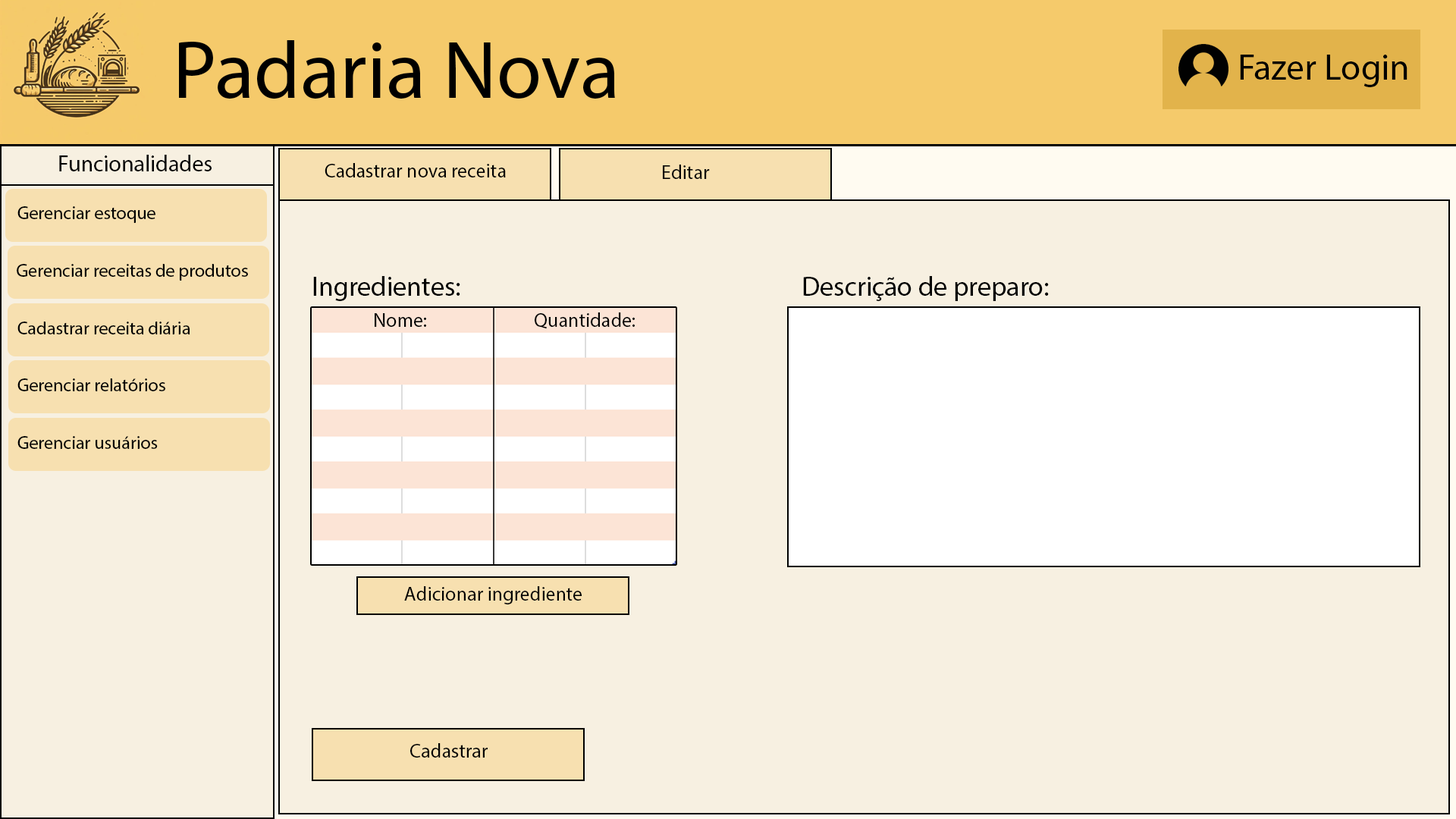
<style>
.page{position:relative;width:1456px;height:819px;background:#f7f0e1}
.page>*{position:absolute;margin:0}
.t1{font:81.6px "MyriadPro-Regular";color:#000000}
.t2{font:36.4px "MyriadPro-Regular";color:#000000}
.t3{font:22.7px "MyriadPro-Regular";color:#000000}
.t4{font:19.7px "MyriadPro-Regular";color:#000000}
.t5{font:18.2px "MyriadPro-Regular";color:#000000}
.t6{font:27.3px "MyriadPro-Regular";color:#000000}
</style>
<div class="page">
<p class="t1" style="left:179px;top:40px;width:436px;height:59px">Padaria Nova</p>
<p class="t2" style="left:1240px;top:55px;width:167px;height:32px">Fazer Login</p>
<p class="t3" style="left:59px;top:155px;width:153px;height:16px">Funcionalidades</p>
<p class="t4" style="left:325px;top:163px;width:181px;height:14px">Cadastrar nova receita</p>
<p class="t4" style="left:663px;top:165px;width:47px;height:14px">Editar</p>
<p class="t5" style="left:17px;top:206px;width:138px;height:17px">Gerenciar estoque</p>
<p class="t5" style="left:17px;top:264px;width:231px;height:17px">Gerenciar receitas de produtos</p>
<p class="t6" style="left:313px;top:276px;width:147px;height:25px">Ingredientes:</p>
<p class="t6" style="left:803px;top:276px;width:246px;height:25px">Descrição de preparo:</p>
<p class="t4" style="left:375px;top:313px;width:51px;height:14px">Nome:</p>
<p class="t4" style="left:535px;top:312px;width:100px;height:17px">Quantidade:</p>
<p class="t5" style="left:17px;top:322px;width:173px;height:12px">Cadastrar receita diária</p>
<p class="t5" style="left:17px;top:378px;width:148px;height:13px">Gerenciar relatórios</p>
<p class="t5" style="left:17px;top:436px;width:141px;height:13px">Gerenciar usuários</p>
<p class="t4" style="left:404px;top:586px;width:178px;height:18px">Adicionar ingrediente</p>
<p class="t4" style="left:410px;top:743px;width:78px;height:15px">Cadastrar</p>
</div>
